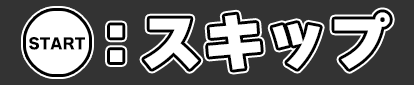
<style>
.page{position:relative;width:414px;height:85px;background:#333333}
.page>*{position:absolute;margin:0}
.t1{font:62.5px "WanpakuRuika-08";color:#ffffff}
.t2{font:15px "WanpakuRuika-08";color:#000000}
</style>
<div class="page">
<p class="t1" style="left:110px;top:12px;width:280px;height:58px">: スキップ</p>
<p class="t2" style="left:29px;top:37px;width:56px;height:13px">START</p>
</div>
